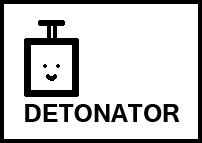
<style>
.page{position:relative;width:202px;height:143px;background:#ffffff}
.page>*{position:absolute;margin:0}
.t1{font:31.7px "Tunga-Bold";color:#000000}
</style>
<div class="page">
<p class="t1" style="left:25px;top:104px;width:155px;height:18px">DETONATOR</p>
</div>
